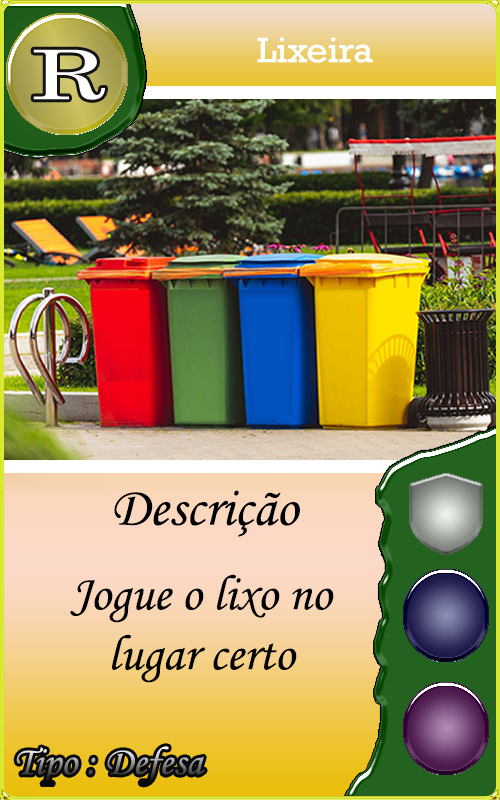
<style>
.page{position:relative;width:500px;height:800px}
.page>*{position:absolute;margin:0}
.t1{font:35.9px "Rockwell";color:#ffffff;scale:1.04 1}
.t2{font:55px "MonotypeCorsiva";color:#000000}
.t3{font:50px "MonotypeCorsiva";color:#000000}
</style>
<div class="page">
<p class="t1" style="left:257px;top:37px;width:116px;height:26px">Lixeira</p>
<p class="t2" style="left:114px;top:490px;width:186px;height:47px">Descrição</p>
<p class="t3" style="left:70px;top:574px;width:264px;height:109px;text-align:center">Jogue o lixo no <br>lugar certo</p>
</div>
